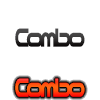
<style>
.page{position:relative;width:100px;height:100px;background:#ffffff}
.page>*{position:absolute;margin:0}
.t1{font:31.1px "NicoKaku";letter-spacing:-0.165em;scale:0.7 1}
</style>
<div class="page">
<p class="t1" style="left:15px;top:28px;width:70px;height:19px">Combo</p>
<p class="t1" style="left:15px;top:78px;width:70px;height:19px">Combo</p>
</div>
